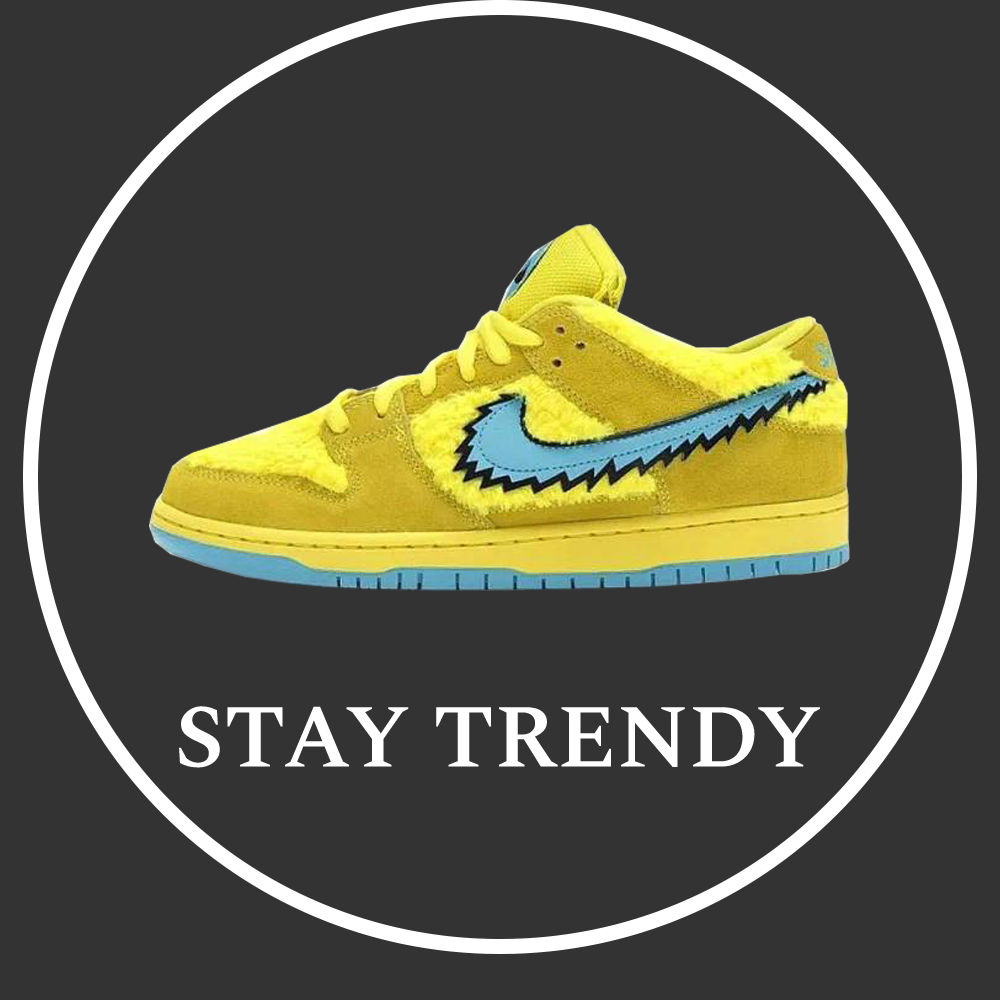
<style>
.page{position:relative;width:1000px;height:1000px;background:#333333}
.page>*{position:absolute;margin:0}
.t1{font:89.4px "SpectralSC-SemiBold";color:#ffffff}
</style>
<div class="page">
<p class="t1" style="left:179px;top:706px;width:641px;height:62px">STAY TRENDY</p>
</div>
